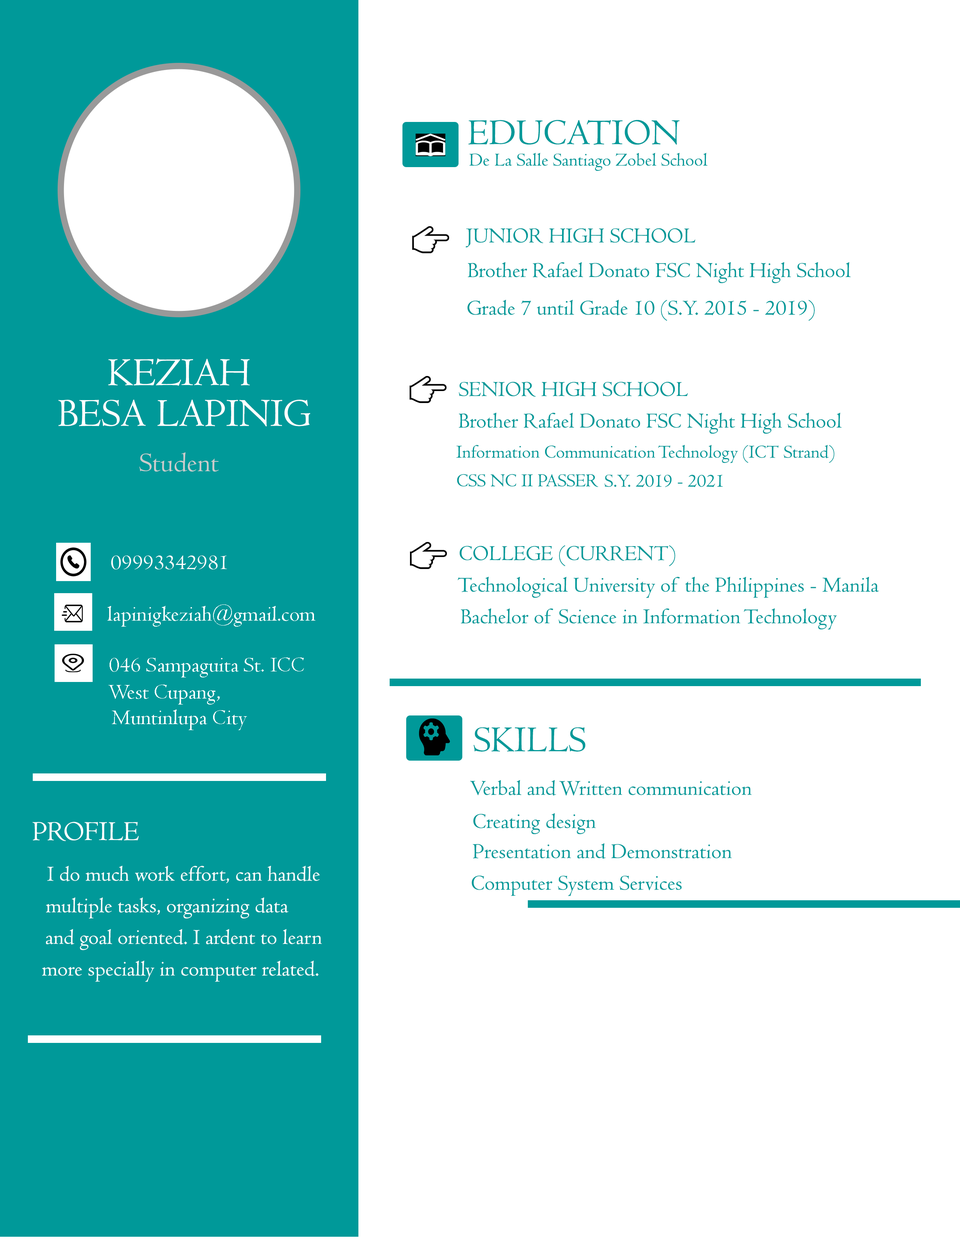
<style>
.page{position:relative;width:960px;height:1242px;background:#ffffff}
.page>*{position:absolute;margin:0}
.t1{font:37.6px "Centaur";color:#009999}
.t2{font:18.8px "Centaur";color:#009999}
.t3{font:22px "Centaur";color:#009999}
.t4{font:40.8px/40.8px "Centaur";color:#ffffff}
.t5{font:4.5px "Centaur";color:#009999}
.t6{font:28.2px "Centaur";color:#cccccc}
.t7{font:22px "Centaur";color:#ffffff}
.t8{font:28.2px "Centaur";color:#ffffff}
</style>
<div class="page">
<p class="t1" style="left:468px;top:120px;width:211px;height:25px">EDUCATION</p>
<p class="t2" style="left:469px;top:153px;width:238px;height:18px">De La Salle Santiago Zobel School</p>
<p class="t3" style="left:465px;top:228px;width:230px;height:20px">JUNIOR HIGH SCHOOL</p>
<p class="t3" style="left:468px;top:262px;width:383px;height:21px">Brother Rafael Donato FSC Night High School</p>
<p class="t3" style="left:467px;top:300px;width:348px;height:21px">Grade 7 until Grade 10 (S.Y. 2015 - 2019)</p>
<p class="t4" style="left:58px;top:358px;width:252px;height:69px;text-align:center">KEZIAH <br>BESA LAPINIG</p>
<p class="t3" style="left:458px;top:382px;width:230px;height:15px">SENIOR HIGH SCHOOL</p>
<p class="t3" style="left:458px;top:413px;width:384px;height:21px">Brother Rafael Donato FSC Night High School</p>
<p class="t5" style="left:456px;top:445px;width:379px;height:18px;text-align:center">Information Communication Technology (ICT Strand)</p>
<p class="t6" style="left:139px;top:452px;width:80px;height:20px">Student</p>
<p class="t5" style="left:457px;top:474px;width:141px;height:13px;text-align:center">CSS NC II PASSER</p>
<p class="t5" style="left:604px;top:475px;width:119px;height:12px;text-align:center">S.Y. 2019 - 2021</p>
<p class="t3" style="left:460px;top:545px;width:215px;height:22px">COLLEGE (CURRENT)</p>
<p class="t7" style="left:111px;top:556px;width:116px;height:14px">09993342981</p>
<p class="t3" style="left:457px;top:577px;width:422px;height:21px">Technological University of the Philippines - Manila</p>
<p class="t7" style="left:107px;top:605px;width:208px;height:22px">lapinigkeziah@gmail.com</p>
<p class="t3" style="left:461px;top:608px;width:376px;height:22px">Bachelor of Science in Information Technology</p>
<p class="t7" style="left:110px;top:658px;width:194px;height:20px">046 Sampaguita St. ICC</p>
<p class="t7" style="left:108px;top:685px;width:112px;height:20px">West Cupang,</p>
<p class="t7" style="left:112px;top:710px;width:135px;height:20px">Muntinlupa City</p>
<p class="t1" style="left:474px;top:727px;width:111px;height:25px">SKILLS</p>
<p class="t3" style="left:470px;top:780px;width:282px;height:16px">Verbal and Written communication</p>
<p class="t8" style="left:32px;top:822px;width:107px;height:19px">PROFILE</p>
<p class="t3" style="left:473px;top:813px;width:123px;height:22px">Creating design</p>
<p class="t3" style="left:473px;top:843px;width:259px;height:16px">Presentation and Demonstration</p>
<p class="t7" style="left:47px;top:866px;width:273px;height:17px">I do much work effort, can handle</p>
<p class="t3" style="left:472px;top:876px;width:210px;height:20px">Computer System Services</p>
<p class="t7" style="left:46px;top:897px;width:242px;height:22px">multiple tasks, organizing data</p>
<p class="t7" style="left:46px;top:929px;width:276px;height:21px">and goal oriented. I ardent to learn</p>
<p class="t7" style="left:42px;top:961px;width:276px;height:21px">more specially in computer related.</p>
</div>
